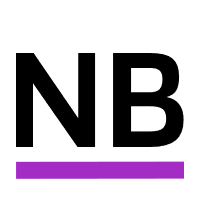
<style>
.page{position:relative;width:200px;height:200px;background:#ffffff}
.page>*{position:absolute;margin:0}
.t1{font:150px "Blinker-SemiBold";color:#000000}
</style>
<div class="page">
<p class="t1" style="left:16px;top:52px;width:168px;height:95px">NB</p>
</div>
